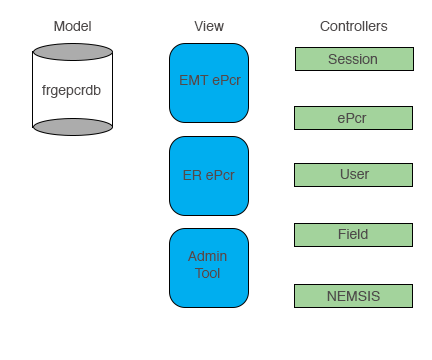
<style>
.page{position:relative;width:432px;height:360px;background:#ffffff}
.page>*{position:absolute;margin:0}
.t1{font:14px "Helvetica";color:#4f4b4b}
</style>
<div class="page">
<p class="t1" style="left:54px;top:21px;width:37px;height:10px">Model</p>
<p class="t1" style="left:194px;top:21px;width:30px;height:10px">View</p>
<p class="t1" style="left:320px;top:21px;width:68px;height:10px">Controllers</p>
<p class="t1" style="left:328px;top:54px;width:49px;height:10px">Session</p>
<p class="t1" style="left:180px;top:75px;width:61px;height:10px">EMT ePcr</p>
<p class="t1" style="left:42px;top:85px;width:59px;height:13px">frgepcrdb</p>
<p class="t1" style="left:337px;top:113px;width:30px;height:10px">ePcr</p>
<p class="t1" style="left:183px;top:170px;width:52px;height:10px">ER ePcr</p>
<p class="t1" style="left:340px;top:169px;width:30px;height:10px">User</p>
<p class="t1" style="left:338px;top:229px;width:30px;height:10px">Field</p>
<p class="t1" style="left:187px;top:251px;width:40px;height:27px;text-align:center">Admin<br>Tool</p>
<p class="t1" style="left:327px;top:291px;width:53px;height:10px">NEMSIS</p>
</div>
